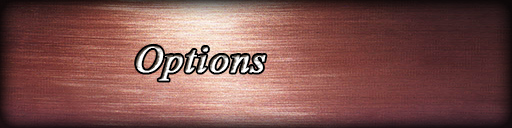
<style>
.page{position:relative;width:512px;height:128px}
.page>*{position:absolute;margin:0}
.t1{font:48px "Vijaya";letter-spacing:0.005em;font-weight:bold}
</style>
<div class="page">
<p class="t1" style="left:136px;top:46px;width:130px;height:35px">Options</p>
</div>
